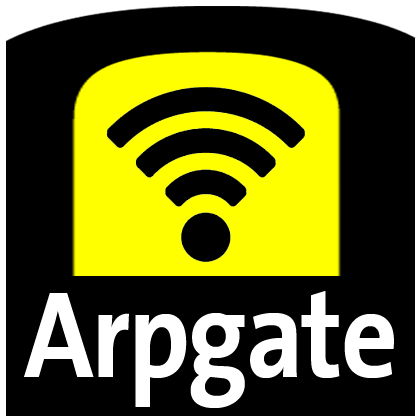
<style>
.page{position:relative;width:420px;height:420px;background:#000000}
.page>*{position:absolute;margin:0}
.t1{font:124.6px "TheSansSwisscom-Bold";letter-spacing:-0.02em;color:#ffffff;scale:0.89 1}
</style>
<div class="page">
<p class="t1" style="left:24px;top:291px;width:370px;height:117px">Arpgate</p>
</div>
